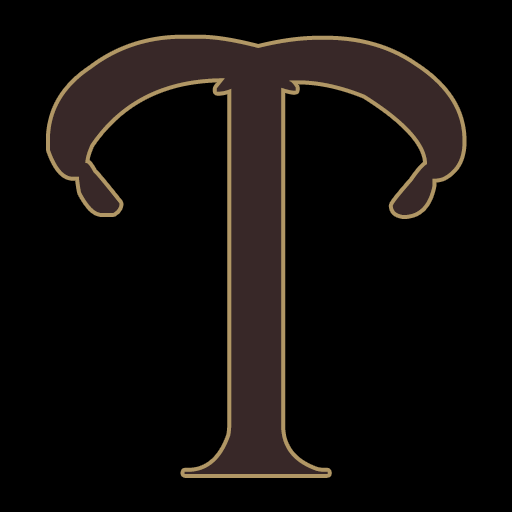
<style>
.page{position:relative;width:512px;height:512px;background:#000000}
.page>*{position:absolute;margin:0}
.t1{font:530.5px "AntiqueQuestSt";letter-spacing:-0.02em;color:#382828}
</style>
<div class="page">
<p class="t1" style="left:50px;top:38px;width:413px;height:436px">T</p>
</div>
